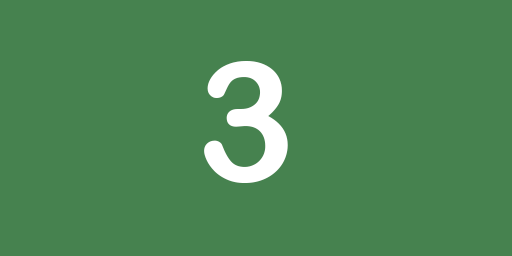
<style>
.page{position:relative;width:512px;height:256px;background:#46824f}
.page>*{position:absolute;margin:0}
.t1{font:167.2px "ArialRoundedMTBold";color:#ffffff}
</style>
<div class="page">
<p class="t1" style="left:204px;top:61px;width:84px;height:122px">3</p>
</div>
